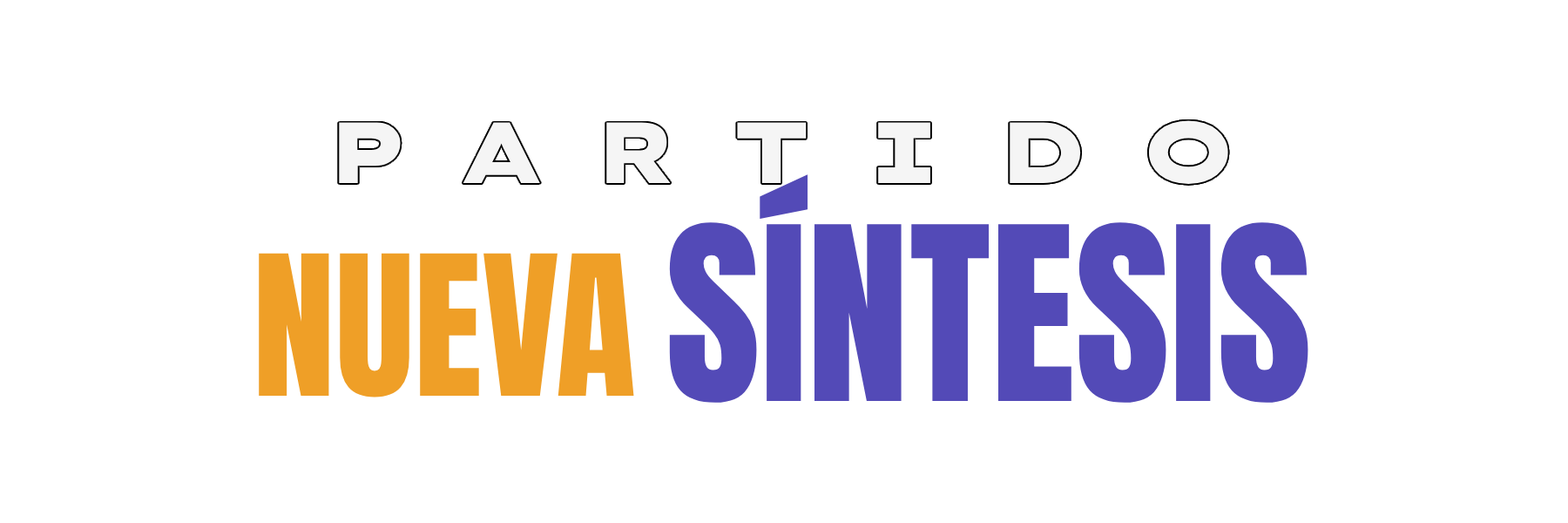
<style>
.page{position:relative;width:1568px;height:523px;background:#ffffff}
.page>*{position:absolute;margin:0}
.t1{font:205.6px "Anton-Regular";color:#534ab7}
.t2{font:165.5px "Anton-Regular";color:#ef9f27}
</style>
<div class="page">
<p class="t1" style="left:669px;top:174px;width:639px;height:228px">SÍNTESIS</p>
<p class="t2" style="left:259px;top:253px;width:375px;height:144px">NUEVA</p>
</div>
